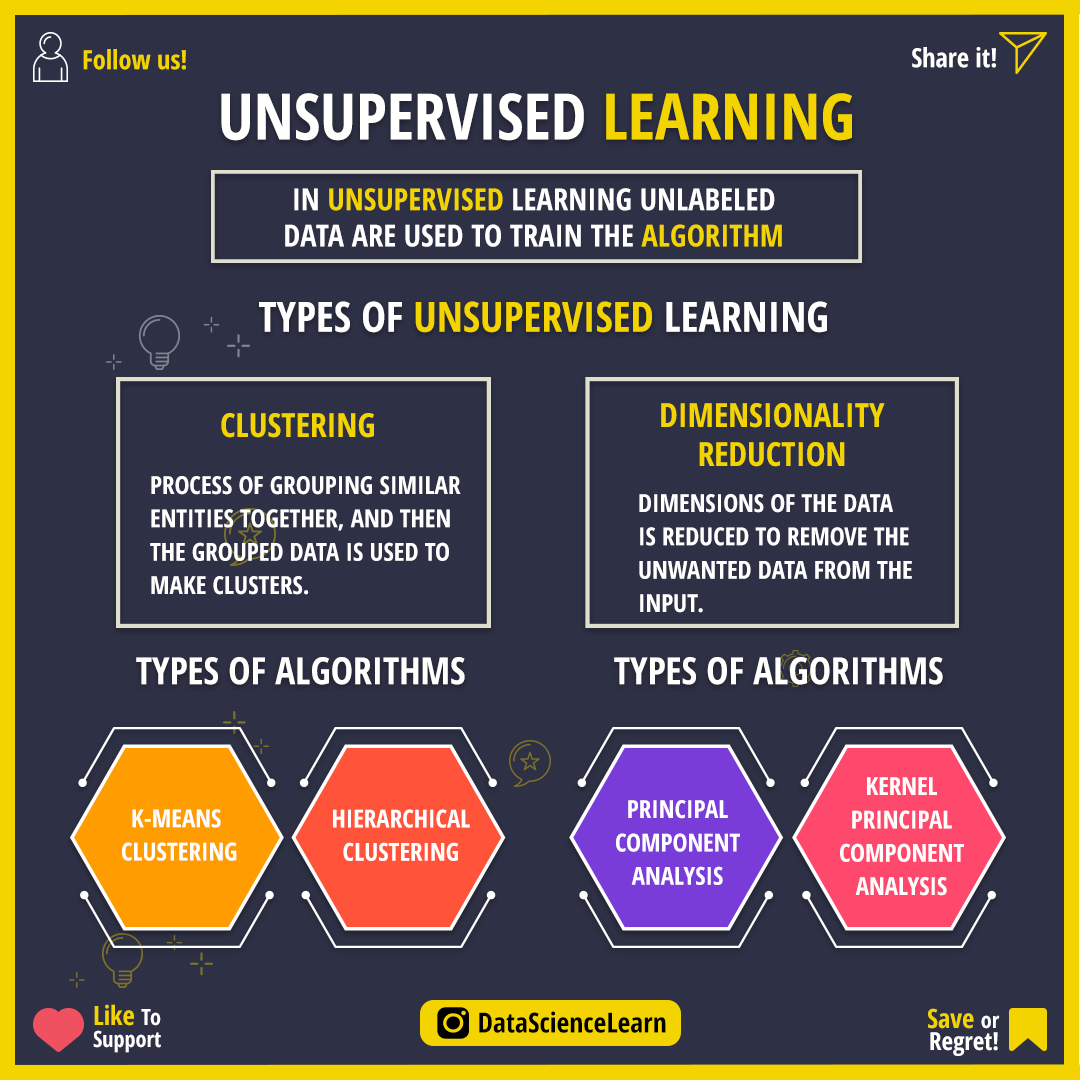
<style>
.page{position:relative;width:1080px;height:1080px;background:#2e3045}
.page>*{position:absolute;margin:0}
.t1{font:26.4px "OpenSans-CondensedBold";color:#f3d400}
.t2{font:26.4px "OpenSans-CondensedBold";color:#ffffff}
.t3{font:63.9px "OpenSans-CondensedBold";color:#fffffe}
.t4{font:63.9px "OpenSans-CondensedBold";color:#f3d400}
.t5{font:30.6px/36.1px "OpenSans-CondensedBold";color:#ffffff}
.t6{font:30.6px/36.1px "OpenSans-CondensedBold";color:#f3d400}
.t7{font:41.7px "OpenSans-CondensedBold";color:#f3d400}
.t8{font:41.7px "OpenSans-CondensedBold";color:#ffffff}
.t9{font:33.3px "OpenSans-CondensedBold";color:#f3d400}
.t10{font:33.3px/38.9px "OpenSans-CondensedBold";color:#f3d400}
.t11{font:25px/33.3px "OpenSans-CondensedBold";color:#ffffff}
.t12{font:37.5px "OpenSans-CondensedBold";color:#fffffe}
.t13{font:22.2px/22.2px "OpenSans-CondensedBold";color:#ffffff}
.t14{font:26.4px/22.2px "OpenSans-CondensedBold";color:#f3d400}
.t15{font:27.8px "OpenSans-CondensedBold";color:#000000}
.t16{font:25px/22.2px "OpenSans-CondensedBold";color:#ffffff}
</style>
<div class="page">
<p class="t1" style="left:83px;top:49px;width:103px;height:21px">Follow us!</p>
<p class="t2" style="left:912px;top:47px;width:84px;height:21px">Share it!</p>
<p class="t3" style="left:221px;top:93px;width:631px;height:48px">UNSUPERVISED <span class="t4">LEARNING</span></p>
<p class="t5" style="left:285px;top:188px;width:497px;height:59px;text-align:center">IN <span class="t6">UNSUPERVISED </span>LEARNING UNLABELED<br>DATA ARE USED TO TRAIN THE <span class="t6">ALGORITHM</span></p>
<p class="t7" style="left:259px;top:301px;width:568px;height:32px"><span class="t8">TYPES OF </span>UNSUPERVISED <span class="t8">LEARNING</span></p>
<p class="t9" style="left:221px;top:413px;width:153px;height:25px">CLUSTERING</p>
<p class="t10" style="left:661px;top:403px;width:224px;height:64px;text-align:center">DIMENSIONALITY<br>REDUCTION</p>
<p class="t11" style="left:150px;top:476px;width:311px;height:119px">PROCESS OF GROUPING SIMILAR <br>ENTITIES TOGETHER, AND THEN <br>THE GROUPED DATA IS USED TO <br>MAKE CLUSTERS.</p>
<p class="t11" style="left:639px;top:494px;width:273px;height:119px">DIMENSIONS OF THE DATA <br>IS REDUCED TO REMOVE THE <br>UNWANTED DATA FROM THE<br>INPUT.</p>
<p class="t12" style="left:136px;top:657px;width:329px;height:28px">TYPES OF ALGORITHMS</p>
<p class="t12" style="left:614px;top:657px;width:329px;height:28px">TYPES OF ALGORITHMS</p>
<p class="t11" style="left:840px;top:777px;width:124px;height:119px;text-align:center">KERNEL<br>PRINCIPAL<br>COMPONENT<br>ANALYSIS</p>
<p class="t11" style="left:122px;top:809px;width:115px;height:52px;text-align:center">K-MEANS <br>CLUSTERING</p>
<p class="t11" style="left:333px;top:809px;width:137px;height:52px;text-align:center">HIERARCHICAL<br>CLUSTERING</p>
<p class="t11" style="left:616px;top:800px;width:124px;height:85px;text-align:center">PRINCIPAL<br>COMPONENT<br>ANALYSIS</p>
<p class="t13" style="left:93px;top:1004px;width:68px;height:49px"><span class="t14">Like </span>To<br>Support</p>
<p class="t15" style="left:479px;top:1011px;width:187px;height:22px">DataScienceLearn</p>
<p class="t16" style="left:928px;top:1008px;width:72px;height:48px;text-align:right"><span class="t14">Save </span><span class="t13">or<br></span>Regret!</p>
</div>
